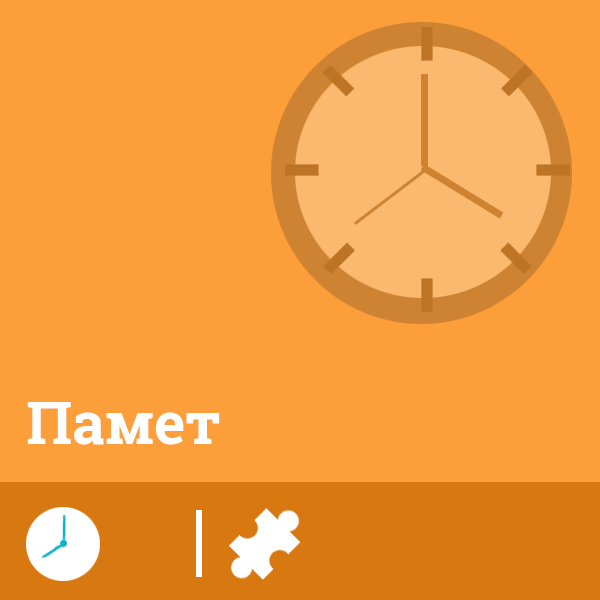
<style>
.page{position:relative;width:600px;height:600px;background:#fc9f3a}
.page>*{position:absolute;margin:0}
.t1{font:58.5px "RobotoSlab-Bold";color:#ffffff}
</style>
<div class="page">
<p class="t1" style="left:27px;top:402px;width:193px;height:43px">Памет</p>
</div>
